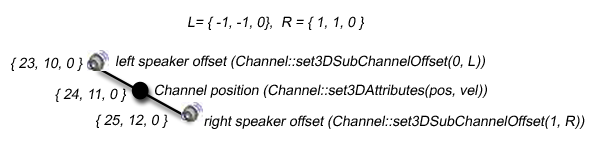
<style>
.page{position:relative;width:600px;height:143px;background:#ffffff}
.page>*{position:absolute;margin:0}
.t1{font:14.1px "ArialMT";color:#000000;font-style:italic}
</style>
<div class="page">
<p class="t1" style="left:188px;top:16px;width:176px;height:14px">L= { -1, -1, 0},  R = { 1, 1, 0 }</p>
<p class="t1" style="left:11px;top:57px;width:72px;height:14px">{ 23, 10, 0 }</p>
<p class="t1" style="left:116px;top:55px;width:369px;height:14px">left speaker offset (Channel::set3DSubChannelOffset(0, L))</p>
<p class="t1" style="left:55px;top:88px;width:71px;height:14px">{ 24, 11, 0 }</p>
<p class="t1" style="left:155px;top:84px;width:332px;height:14px">Channel position (Channel::set3DAttributes(pos, vel))</p>
<p class="t1" style="left:96px;top:114px;width:72px;height:14px">{ 25, 12, 0 }</p>
<p class="t1" style="left:204px;top:115px;width:381px;height:14px">right speaker offset (Channel::set3DSubChannelOffset(1, R))</p>
</div>
